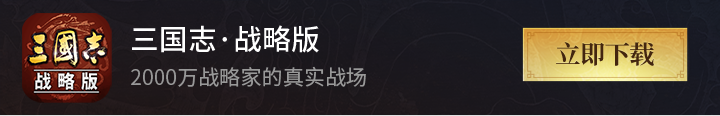
<style>
.page{position:relative;width:720px;height:116px}
.page>*{position:absolute;margin:0}
.t1{font:28.8px "SourceHanSansCN-Medium";color:#ffffff}
.t2{font:21.1px "SourceHanSansCN-Regular";color:#989898}
</style>
<div class="page">
<p class="t1" style="left:132px;top:25px;width:187px;height:28px">三国志·战略版</p>
<p class="t2" style="left:131px;top:66px;width:235px;height:21px">2000万战略家的真实战场</p>
</div>
